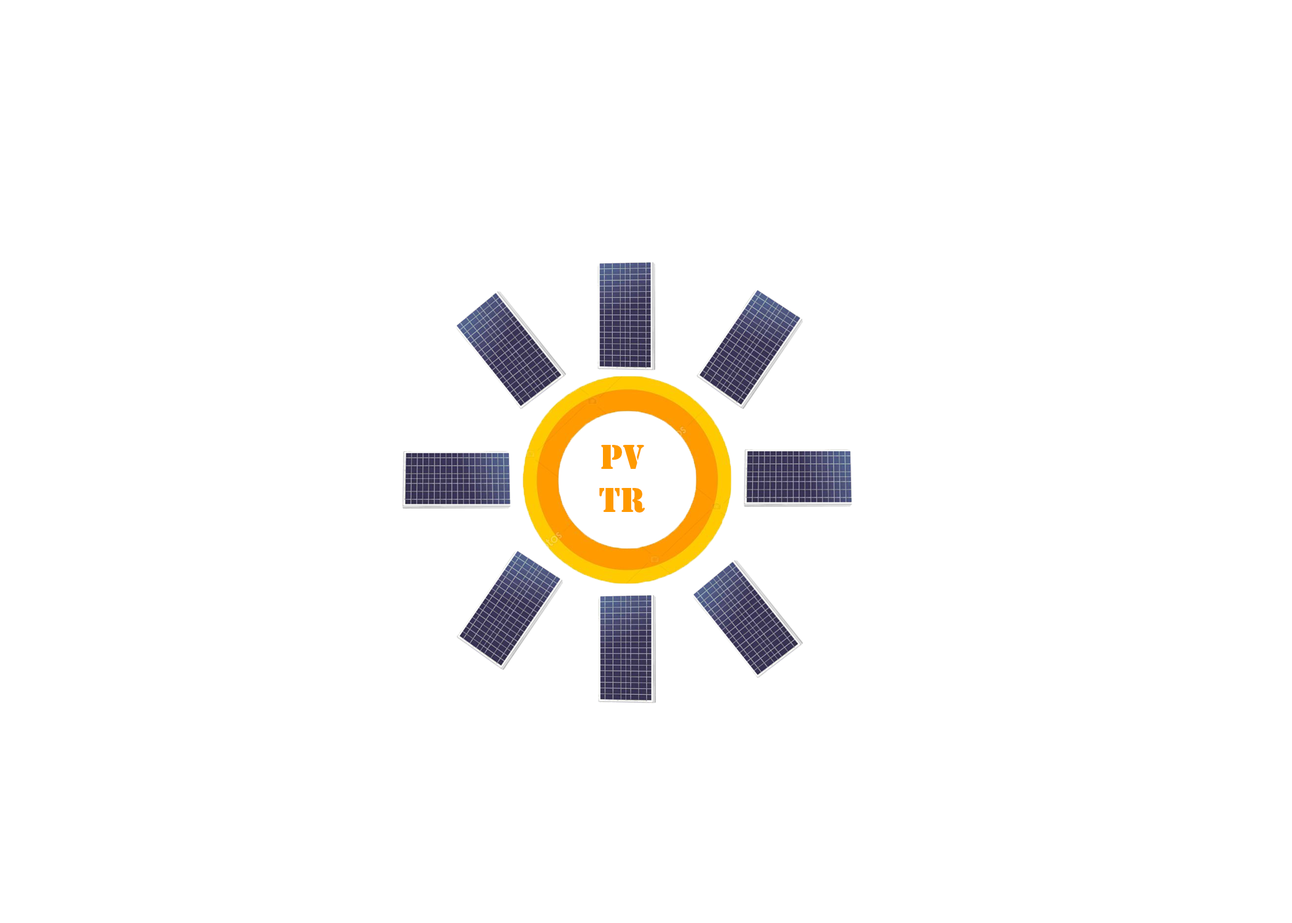
<style>
.page{position:relative;width:1292px;height:923px;background:#ffffff}
.page>*{position:absolute;margin:0}
.t1{font:35.9px "Stencil";color:#ff9a00}
</style>
<div class="page">
<p class="t1" style="left:599px;top:445px;width:46px;height:68px;text-align:center">PV<br>TR</p>
</div>
